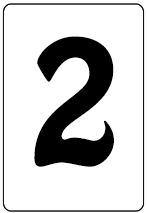
<style>
.page{position:relative;width:147px;height:213px;background:#ffffff}
.page>*{position:absolute;margin:0}
.t1{font:154.6px "HoboStd";color:#000000;scale:1.05 1}
</style>
<div class="page">
<p class="t1" style="left:34px;top:36px;width:80px;height:131px">2</p>
</div>
